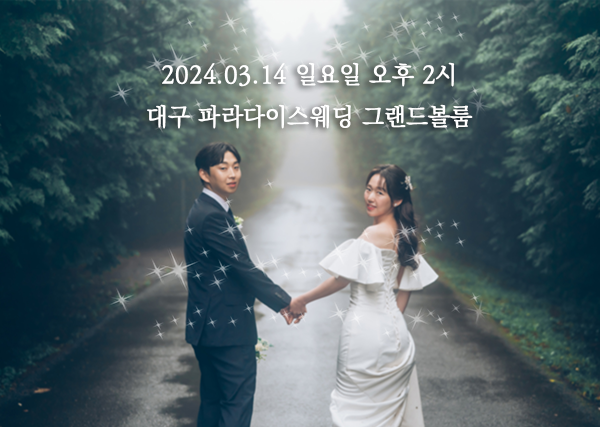
<style>
.page{position:relative;width:600px;height:427px}
.page>*{position:absolute;margin:0}
.t1{font:24px "KoPubWorldBatangPL";color:#ffffff;font-weight:bold;scale:0.96 1}
</style>
<div class="page">
<p class="t1" style="left:147px;top:62px;width:326px;height:67px;text-align:center">2024.03.14 일요일 오후 2시<br>대구 파라다이스웨딩 그랜드볼룸</p>
</div>
